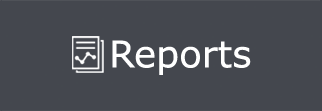
<style>
.page{position:relative;width:322px;height:111px;background:#44474e}
.page>*{position:absolute;margin:0}
.t1{font:36.8px "Verdana";color:#ffffff}
</style>
<div class="page">
<p class="t1" style="left:112px;top:40px;width:139px;height:35px">Reports</p>
</div>
